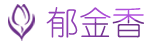
<style>
.page{position:relative;width:150px;height:45px;background:#ffffff}
.page>*{position:absolute;margin:0}
.t1{font:33px "YouYuan"}
</style>
<div class="page">
<p class="t1" style="left:46px;top:7px;width:98px;height:31px">郁金香</p>
</div>
